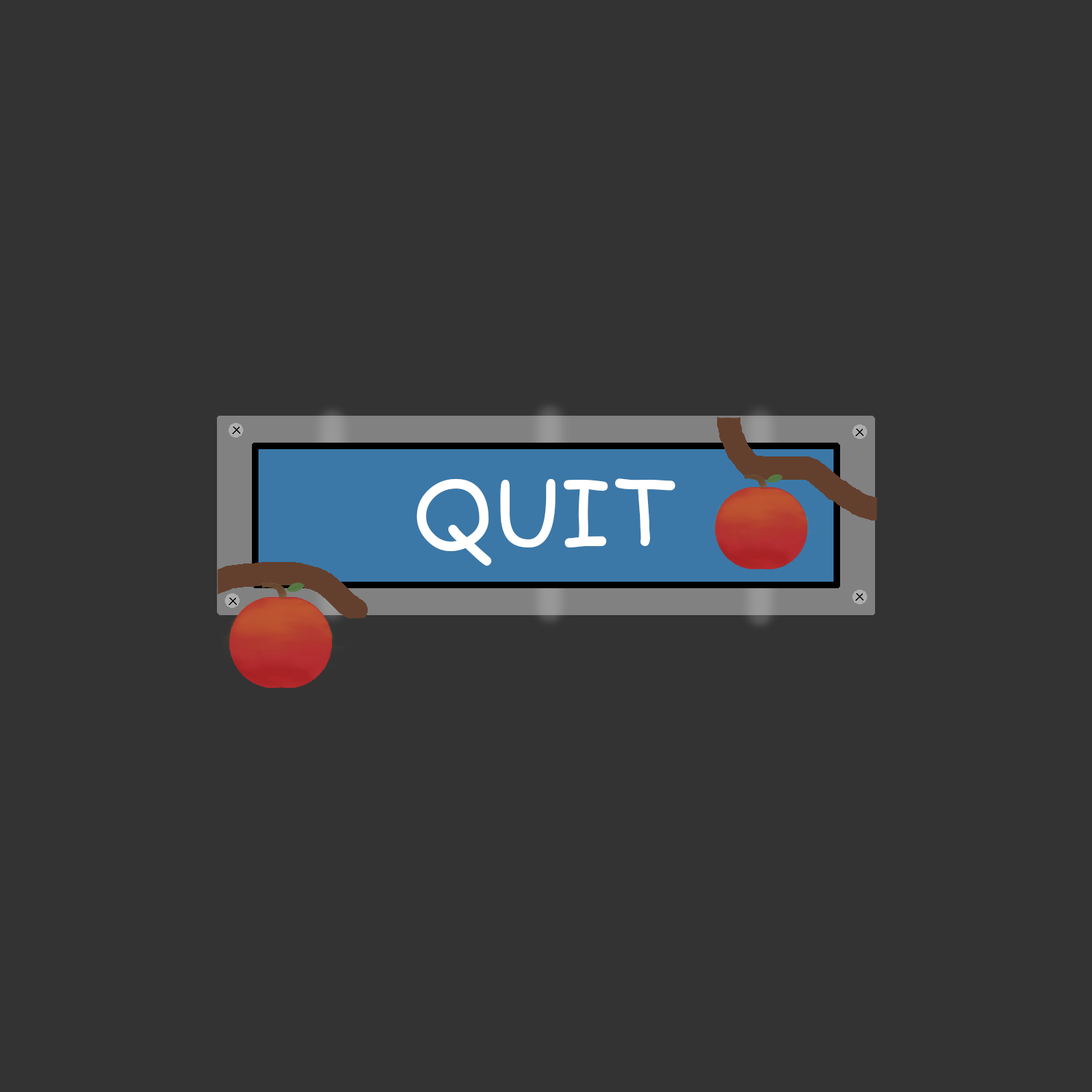
<style>
.page{position:relative;width:1092px;height:1092px;background:#333333}
.page>*{position:absolute;margin:0}
.t1{font:91px "ComicSansMS";color:#ffffff}
</style>
<div class="page">
<p class="t1" style="left:416px;top:478px;width:260px;height:88px">QUIT</p>
</div>
